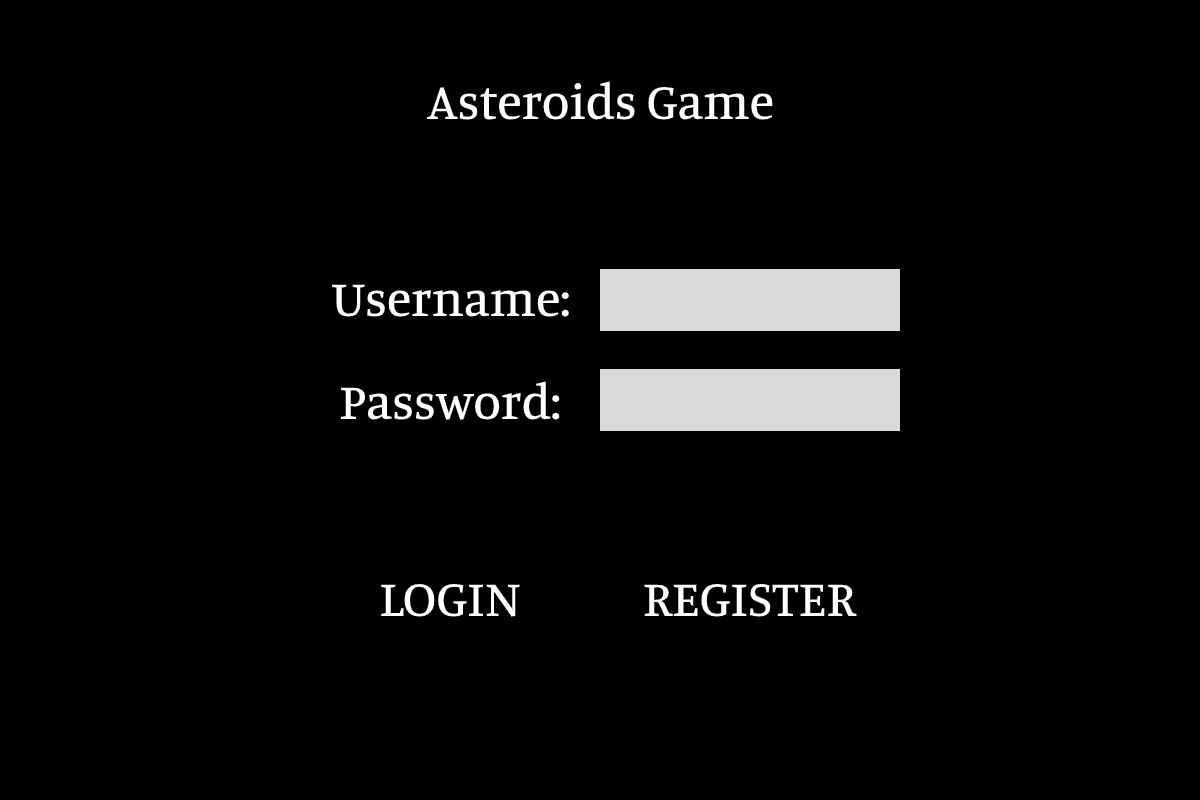
<style>
.page{position:relative;width:1200px;height:800px;background:#000000}
.page>*{position:absolute;margin:0}
.t1{font:51px "Manuale-Medium";color:#ffffff}
</style>
<div class="page">
<p class="t1" style="left:427px;top:81px;width:346px;height:39px">Asteroids Game</p>
<p class="t1" style="left:332px;top:284px;width:237px;height:33px">Username:</p>
<p class="t1" style="left:341px;top:381px;width:219px;height:39px">Password:</p>
<p class="t1" style="left:381px;top:583px;width:139px;height:34px">LOGIN</p>
<p class="t1" style="left:644px;top:583px;width:213px;height:34px">REGISTER</p>
</div>
